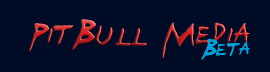
<style>
.page{position:relative;width:270px;height:72px;background:#000b25}
.page>*{position:absolute;margin:0}
.t1{font:63.9px "Twister-Regular";color:#00a4dc;scale:0.91 1}
.t2{font:43.3px "Twister-Regular";color:#00a4dc;scale:0.88 1}
</style>
<div class="page">
<p class="t1" style="left:28px;top:19px;width:222px;height:40px">PitBull Media</p>
<p class="t2" style="left:201px;top:38px;width:49px;height:22px">Beta</p>
</div>
